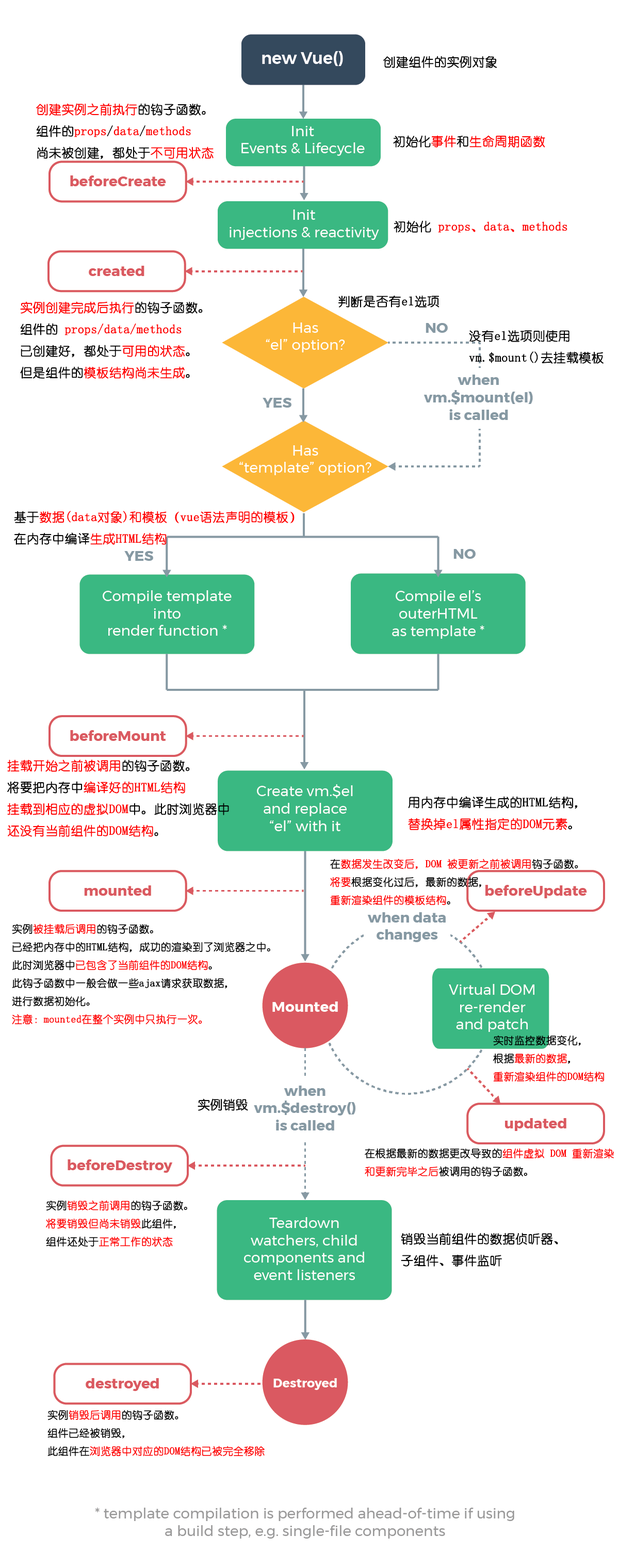
<style>
.page{position:relative;width:619px;height:1568px;background:#ffffff}
.page>*{position:absolute;margin:0}
.t1{font:12.4px "YouYuan";color:#000000;font-weight:bold}
.t2{font:12.4px "YouYuan";color:#ff0000;font-weight:bold}
.t3{font:12.4px "YouYuan";color:#fe0000;font-weight:bold}
.t4{font:10.3px "YouYuan";color:#ff0000;font-weight:bold}
.t5{font:10.3px "YouYuan";color:#010101;font-weight:bold}
.t6{font:10.3px "YouYuan";color:#000000;font-weight:bold}
.t7{font:10.3px "YouYuan";color:#fe0000;font-weight:bold}
</style>
<div class="page">
<p class="t1" style="left:383px;top:56px;width:114px;height:12px">创建组件的实例对象</p>
<p class="t1" style="left:36px;top:103px;width:178px;height:56px"><span class="t2">创建实例之前执行</span>的钩子函数。<br>组件的<span class="t2">props</span>/<span class="t2">data</span>/<span class="t3">methods<br></span>尚未被创建，都处于<span class="t2">不可用状态</span></p>
<p class="t2" style="left:393px;top:135px;width:152px;height:13px"><span class="t1">初始化</span>事件<span class="t1">和</span>生命周期函数</p>
<p class="t3" style="left:394px;top:220px;width:174px;height:13px"><span class="t1">初始化 </span>props、data、methods</p>
<p class="t2" style="left:20px;top:301px;width:183px;height:78px">实例创建完成后执行<span class="t1">的钩子函数。<br>组件的 </span>props/data/methods<br><span class="t1">已创建好，都处于</span>可用的状态<span class="t1">。<br>但是组件的</span>模板结构尚未生成<span class="t1">。</span></p>
<p class="t1" style="left:338px;top:295px;width:102px;height:13px">判断是否有el选项</p>
<p class="t1" style="left:469px;top:330px;width:135px;height:34px">没有el选项则使用<br>vm.$mount()去挂载模板</p>
<p class="t2" style="left:14px;top:511px;width:281px;height:34px"><span class="t1">基于</span>数据(data对象)和模板（vue语法声明的模板）<br><span class="t1">在内存中编译</span>生成HTML结构</p>
<p class="t2" style="left:7px;top:759px;width:222px;height:78px">挂载开始之前被调用<span class="t1">的钩子函数。<br>将要把内存中</span>编译好的HTML结构<br>挂载到相应的虚拟DOM<span class="t1">中。此时浏览器中<br></span>还没有当前组件的DOM结构<span class="t1">。</span></p>
<p class="t1" style="left:408px;top:796px;width:170px;height:34px">用内存中编译生成的HTML结构，<br><span class="t2">替换掉el属性指定的DOM元素</span>。</p>
<p class="t4" style="left:330px;top:859px;width:248px;height:47px"><span class="t5">在</span>数据发生改变后，DOM 被更新之前被调用<span class="t5">钩子函数。<br></span>将要<span class="t6">根据变化过后，最新的数据，<br></span>重新渲染组件的模板结构<span class="t6">。</span></p>
<p class="t6" style="left:12px;top:924px;width:258px;height:101px">实例<span class="t4">被挂载后调用</span>的钩子函数。<br>已经把内存中的HTML结构，成功的渲染到了浏览器之中。<br>此时浏览器中<span class="t4">已包含了当前组件的DOM结构</span>。<br>此钩子函数中一般会做一些ajax请求获取数据，<br>进行数据初始化。<br><span class="t4">注意：mounted在整个实例中只执行一次。</span></p>
<p class="t6" style="left:493px;top:1035px;width:111px;height:47px">实时监控数据变化，<br>根据<span class="t4">最新的数据</span>，<br><span class="t7">重新渲染组件的DOM结构</span></p>
<p class="t1" style="left:198px;top:1098px;width:50px;height:13px">实例销毁</p>
<p class="t4" style="left:365px;top:1148px;width:249px;height:29px"><span class="t6">在根据最新的数据更改导致的</span>组件虚拟 DOM 重新渲染<br>和更新完毕之后<span class="t6">被调用的钩子函数。</span></p>
<p class="t6" style="left:46px;top:1200px;width:141px;height:47px">实例<span class="t4">销毁之前调用</span>的钩子函数。<br><span class="t4">将要销毁但尚未销毁</span>此组件，<br>组件还处于<span class="t4">正常工作的状态</span></p>
<p class="t1" style="left:401px;top:1233px;width:157px;height:34px">销毁当前组件的数据侦听器、<br>子组件、事件监听</p>
<p class="t6" style="left:47px;top:1410px;width:218px;height:47px">实例<span class="t4">销毁后调用</span>的钩子函数。<br>组件已经被销毁，<br>此组件在<span class="t7">浏览器中对应的DOM结构已被完全移除</span></p>
</div>
